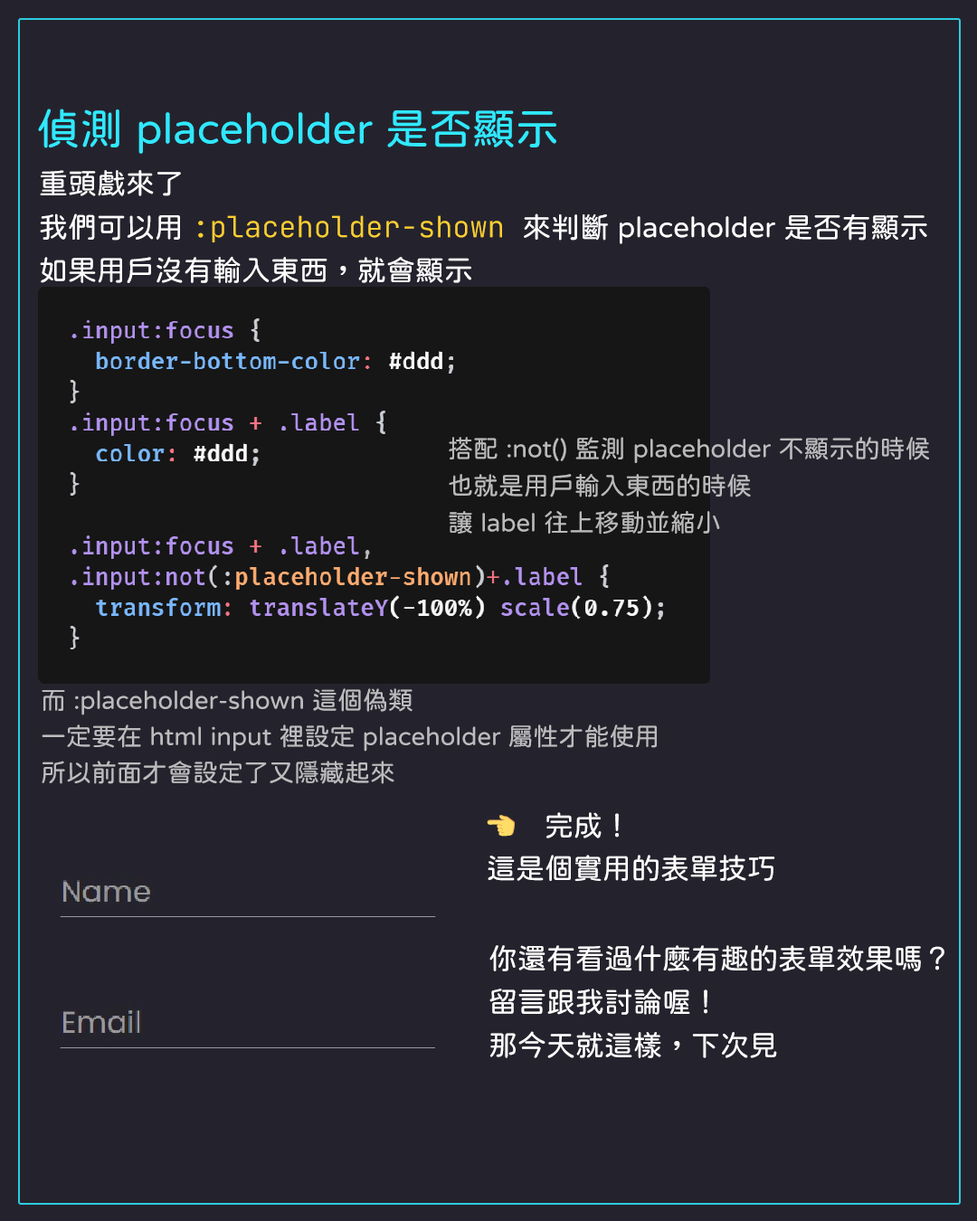
<style>
.page{position:relative;width:977px;height:1221px;background:#24232d}
.page>*{position:absolute;margin:0}
.t1{font:43.4px "jf-openhuninn-1.1";color:#30e8ff}
.t2{font:28.9px/43.4px "jf-openhuninn-1.1";color:#ffffff}
.t3{font:28.9px/43.4px "JetBrainsMono-Light";color:#fccf31}
.t4{font:25.3px/37.1px "jf-openhuninn-1.1";color:#bababa}
.t5{font:25.3px/36.2px "jf-openhuninn-1.1";color:#bcbcbe}
.t6{font:28.9px/43.4px "EmojiOneColor";color:#ffffff}
</style>
<div class="page">
<p class="t1" style="left:38px;top:109px;width:518px;height:45px">偵測 placeholder 是否顯示</p>
<p class="t2" style="left:40px;top:170px;width:887px;height:113px">重頭戲來了<br>我們可以用 <span class="t3">:placeholder-shown </span>來判斷 placeholder 是否有顯示<br>如果用戶沒有輸入東西，就會顯示</p>
<p class="t4" style="left:449px;top:437px;width:480px;height:97px">搭配 :not() 監測 placeholder 不顯示的時候<br>也就是用戶輸入東西的時候 <br>讓 label 往上移動並縮小</p>
<p class="t5" style="left:42px;top:688px;width:615px;height:96px">而 :placeholder-shown 這個偽類<br>一定要在 html input 裡設定 placeholder 屬性才能使用<br>所以前面才會設定了又隱藏起來</p>
<p class="t2" style="left:487px;top:812px;width:288px;height:69px"><span class="t6">👈　</span>完成！<br>這是個實用的表單技巧</p>
<p class="t2" style="left:489px;top:945px;width:455px;height:113px">你還有看過什麼有趣的表單效果嗎？<br>留言跟我討論喔！<br>那今天就這樣，下次見</p>
</div>
